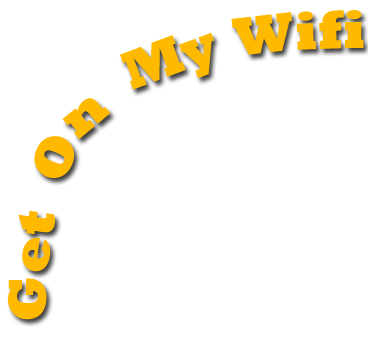
<style>
.page{position:relative;width:368px;height:338px;background:#ffffff}
.page>*{position:absolute;margin:0}
.t1{font:55px "Rockwell-ExtraBold";color:#ffba00}
</style>
<div class="page">
<p class="t1" style="left:8px;top:10px;width:356px;height:310px">Get  On  My Wifi</p>
</div>
